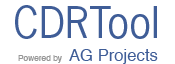
<style>
.page{position:relative;width:175px;height:64px;background:#ffffff}
.page>*{position:absolute;margin:0}
.t1{font:41.7px "NewsGothicStd";color:#3f5d97}
.t2{font:16.7px "Helvetica";color:#3f5d97}
.t3{font:8.3px "Helvetica";color:#969696}
</style>
<div class="page">
<p class="t1" style="left:15px;top:5px;width:142px;height:34px">CDRTool</p>
<p class="t2" style="left:18px;top:49px;width:140px;height:15px"><span class="t3">Powered by </span>AG Projects</p>
</div>
